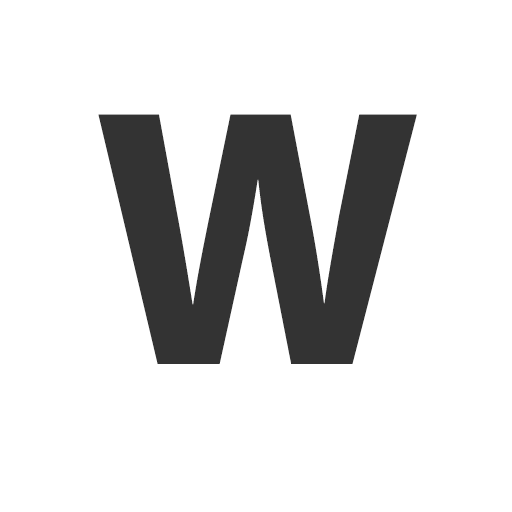
<style>
.page{position:relative;width:512px;height:512px;background:#ffffff}
.page>*{position:absolute;margin:0}
.t1{font:370px "MyriadPro-Bold";color:#333333}
</style>
<div class="page">
<p class="t1" style="left:98px;top:114px;width:319px;height:250px">W</p>
</div>
